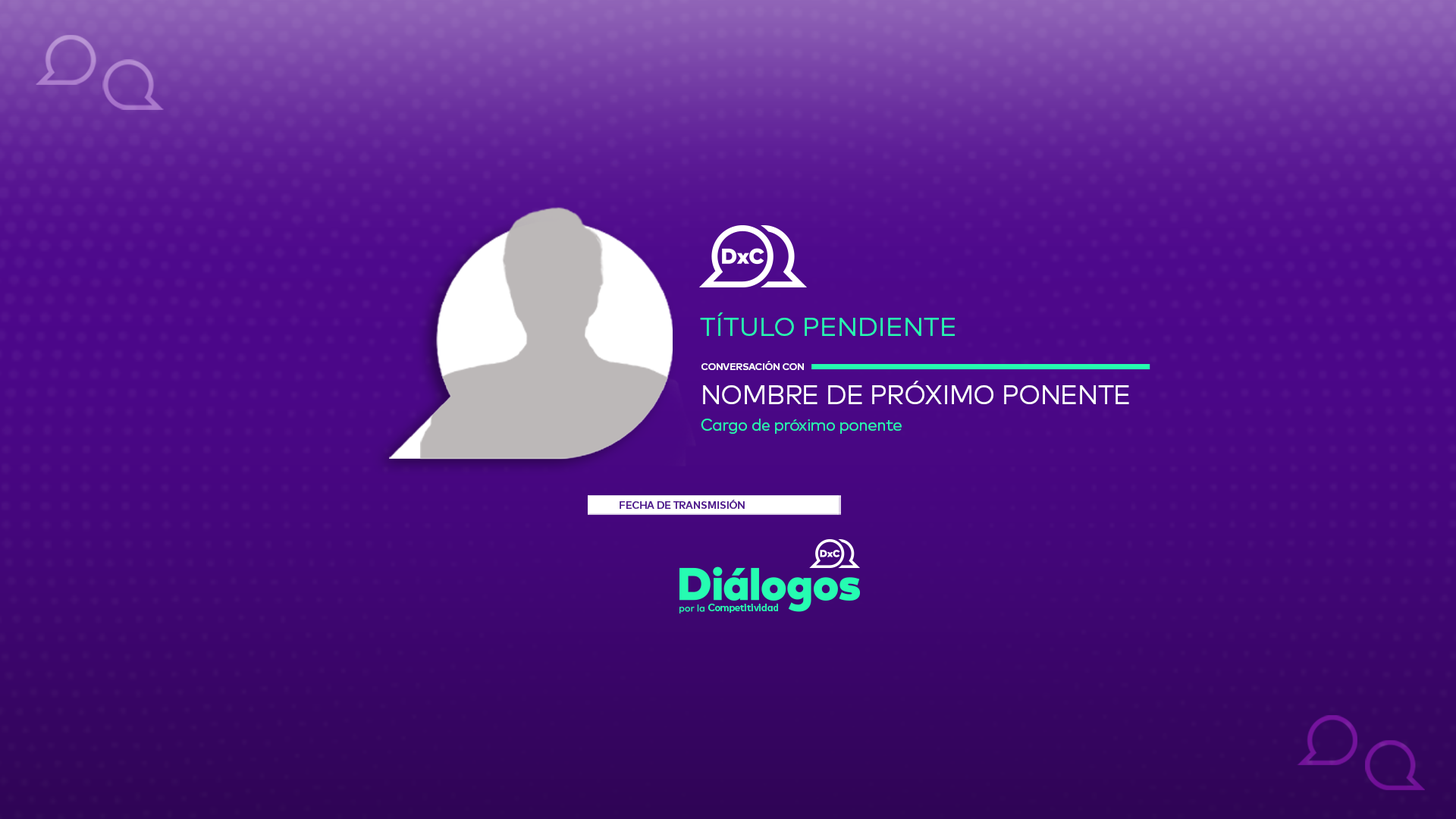
<style>
.page{position:relative;width:1456px;height:819px}
.page>*{position:absolute;margin:0}
.t1{font:25.9px "FFMarkPro-Regular";color:#26fbb1;text-transform:uppercase}
.t2{font:9.7px "FFMarkPro-Bold";letter-spacing:-0.025em;color:#ffffff;text-transform:uppercase}
.t3{font:26.4px "FFMarkPro-Regular";letter-spacing:-0.025em;color:#ffffff}
.t4{font:16.3px "FFMarkPro-Regular";letter-spacing:-0.025em;color:#25fbb0}
.t5{font:10.1px "FFMarkPro-Bold";letter-spacing:-0.02em;color:#4d128c;text-transform:uppercase}
</style>
<div class="page">
<p class="t1" style="left:700px;top:312px;width:255px;height:24px">TÍTULO PENDIENTE</p>
<p class="t2" style="left:701px;top:361px;width:103px;height:9px">conversación con</p>
<p class="t3" style="left:703px;top:381px;width:426px;height:23px">NOMBRE DE PRÓXIMO PONENTE</p>
<p class="t4" style="left:701px;top:419px;width:201px;height:15px">Cargo de próximo ponente</p>
<p class="t5" style="left:620px;top:500px;width:125px;height:9px">FECHA DE TRANSMISIÓN</p>
</div>
